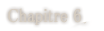
<style>
.page{position:relative;width:104px;height:31px;background:#ffffff}
.page>*{position:absolute;margin:0}
.t1{font:19px "MS-PMincho";color:#d6cdc1;font-weight:bold;scale:0.84 1}
</style>
<div class="page">
<p class="t1" style="left:8px;top:8px;width:73px;height:17px">Chapitre 6</p>
</div>
